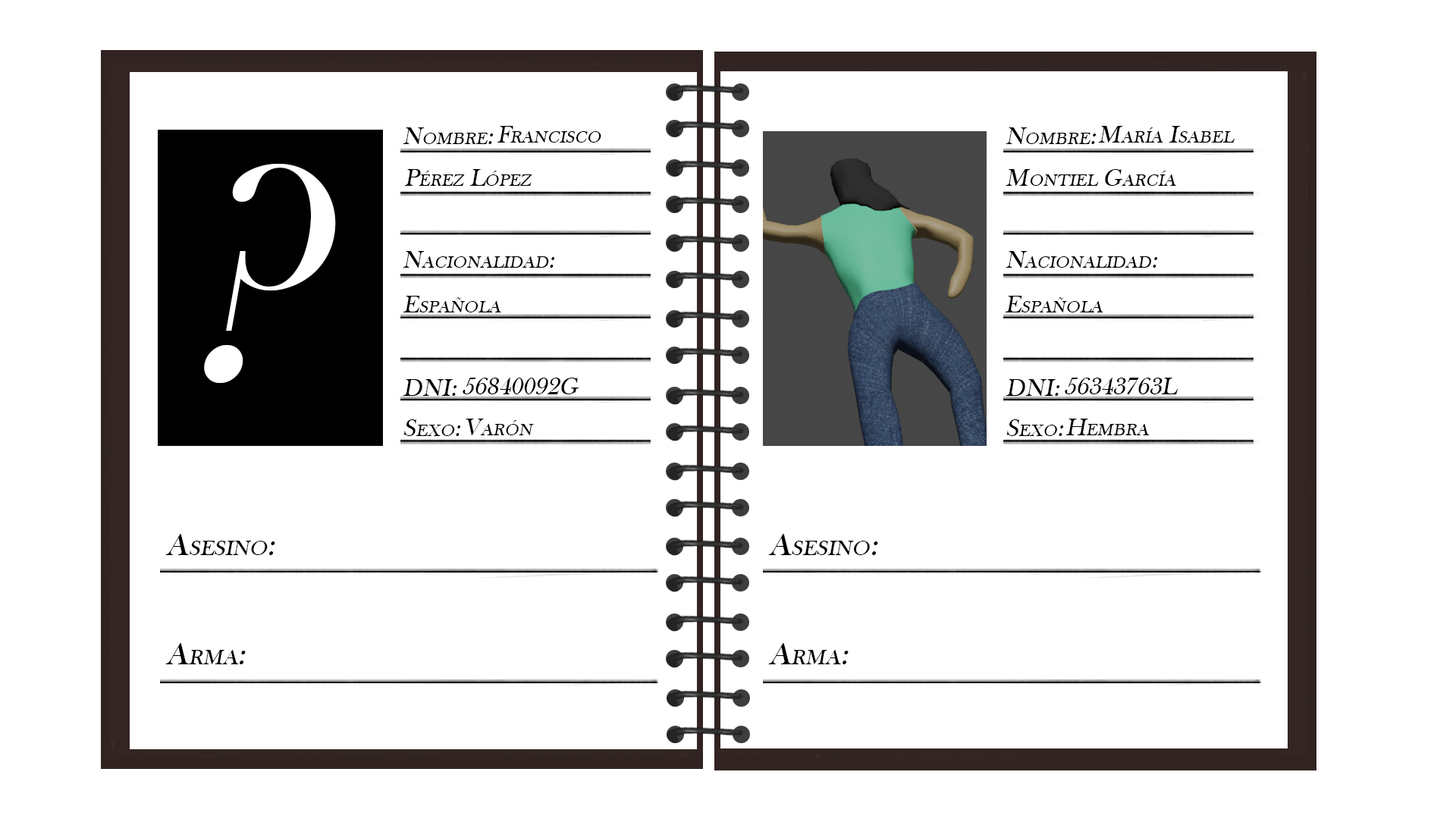
<style>
.page{position:relative;width:1456px;height:819px;background:#ffffff}
.page>*{position:absolute;margin:0}
.t1{font:25.3px "BaskOldFace";color:#000000;font-variant:small-caps;font-style:italic}
.t2{font:322px "BaskOldFace";color:#ffffff;font-variant:small-caps;font-style:italic}
.t3{font:31.6px "BaskOldFace";color:#000000;font-variant:small-caps;font-style:italic}
</style>
<div class="page">
<p class="t1" style="left:497px;top:126px;width:104px;height:17px">Francisco</p>
<p class="t1" style="left:1098px;top:126px;width:137px;height:17px">María Isabel</p>
<p class="t1" style="left:403px;top:127px;width:91px;height:17px">Nombre:</p>
<p class="t1" style="left:1006px;top:127px;width:91px;height:17px">Nombre:</p>
<p class="t2" style="left:204px;top:164px;width:132px;height:219px">?</p>
<p class="t1" style="left:404px;top:169px;width:128px;height:17px">Pérez López</p>
<p class="t1" style="left:1006px;top:169px;width:170px;height:17px">Montiel García</p>
<p class="t1" style="left:403px;top:251px;width:152px;height:17px">Nacionalidad:</p>
<p class="t1" style="left:1006px;top:251px;width:152px;height:17px">Nacionalidad:</p>
<p class="t1" style="left:403px;top:296px;width:98px;height:16px">Española</p>
<p class="t1" style="left:1005px;top:296px;width:98px;height:16px">Española</p>
<p class="t1" style="left:463px;top:378px;width:116px;height:16px">56840092G</p>
<p class="t1" style="left:1065px;top:377px;width:113px;height:17px">56343763L</p>
<p class="t1" style="left:403px;top:379px;width:54px;height:17px">DNI:</p>
<p class="t1" style="left:1006px;top:379px;width:54px;height:17px">DNI:</p>
<p class="t1" style="left:403px;top:419px;width:58px;height:17px">Sexo:</p>
<p class="t1" style="left:466px;top:419px;width:68px;height:16px">Varón</p>
<p class="t1" style="left:1006px;top:419px;width:58px;height:17px">Sexo:</p>
<p class="t1" style="left:1065px;top:419px;width:85px;height:16px">Hembra</p>
<p class="t3" style="left:165px;top:534px;width:110px;height:21px">Asesino:</p>
<p class="t3" style="left:768px;top:534px;width:110px;height:21px">Asesino:</p>
<p class="t3" style="left:165px;top:643px;width:81px;height:21px">Arma:</p>
<p class="t3" style="left:768px;top:643px;width:81px;height:21px">Arma:</p>
</div>
